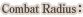
<style>
.page{position:relative;width:83px;height:17px;background:#ffffff}
.page>*{position:absolute;margin:0}
.t1{font:11px "RyuminPro-ExBold";letter-spacing:-0.04em;color:#534738}
</style>
<div class="page">
<p class="t1" style="left:2px;top:4px;width:74px;height:10px">Combat Radius</p>
</div>
